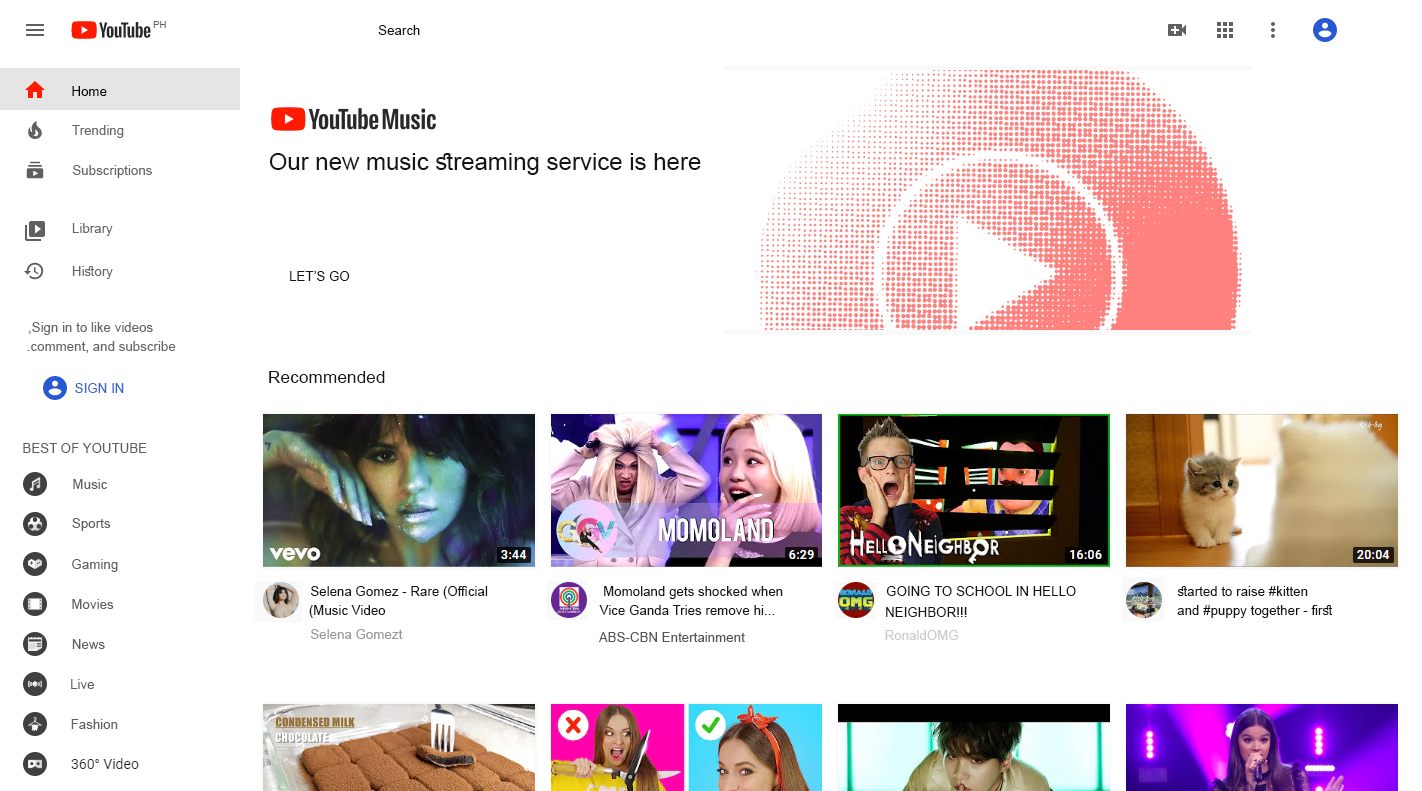
<style>
.page{position:relative;width:1422px;height:791px;background:#ffffff}
.page>*{position:absolute;margin:0}
.t1{font:13.3px "ArialMT";color:#151515}
.t2{font:13.3px "ArialMT";color:#000000}
.t3{font:13.3px "ArialMT";color:#676767}
.t4{font:24px "ArialMT";color:#151515}
.t5{font:17.3px "ArialMT";color:#151515}
.t6{font:13.3px "ArialMT";color:#3a65d7}
.t7{font:13.3px "ArialMT";color:#606060}
.t8{font:13.3px "ArialMT";color:#999999}
.t9{font:13.3px "ArialMT";color:#cbcbcb}
.t10{font:13.3px "ArialMT";color:#565555}
</style>
<div class="page">
<p class="t1" style="left:378px;top:25px;width:42px;height:10px">Search</p>
<p class="t2" style="left:72px;top:86px;width:35px;height:10px">Home</p>
<p class="t3" style="left:72px;top:125px;width:52px;height:13px">Trending</p>
<p class="t4" style="left:269px;top:153px;width:432px;height:22px">Our new music streaming service is here</p>
<p class="t3" style="left:73px;top:165px;width:79px;height:13px">Subscriptions</p>
<p class="t3" style="left:72px;top:223px;width:41px;height:13px">Library</p>
<p class="t3" style="left:72px;top:266px;width:41px;height:13px">History</p>
<p class="t1" style="left:290px;top:271px;width:60px;height:10px">LET’S GO</p>
<p class="t3" style="left:29px;top:322px;width:124px;height:13px">Sign in to like videos,</p>
<p class="t3" style="left:27px;top:341px;width:149px;height:12px">comment, and subscribe.</p>
<p class="t5" style="left:269px;top:371px;width:116px;height:12px">Recommended</p>
<p class="t6" style="left:75px;top:383px;width:49px;height:10px">SIGN IN</p>
<p class="t7" style="left:23px;top:443px;width:124px;height:10px">BEST OF YOUTUBE</p>
<p class="t7" style="left:73px;top:479px;width:35px;height:10px">Music</p>
<p class="t7" style="left:72px;top:518px;width:39px;height:13px">Sports</p>
<p class="t7" style="left:72px;top:559px;width:46px;height:13px">Gaming</p>
<p class="t1" style="left:311px;top:586px;width:177px;height:13px">Selena Gomez - Rare (Official</p>
<p class="t1" style="left:604px;top:586px;width:179px;height:13px">Momoland gets shocked when</p>
<p class="t1" style="left:886px;top:586px;width:190px;height:10px">GOING TO SCHOOL IN HELLO</p>
<p class="t1" style="left:1177px;top:586px;width:131px;height:10px">started to raise #kitten</p>
<p class="t7" style="left:72px;top:599px;width:42px;height:10px">Movies</p>
<p class="t1" style="left:309px;top:605px;width:77px;height:13px">Music Video)</p>
<p class="t1" style="left:599px;top:605px;width:176px;height:10px">...Vice Ganda Tries remove hi</p>
<p class="t1" style="left:1177px;top:605px;width:156px;height:13px">and #puppy together - first</p>
<p class="t1" style="left:886px;top:607px;width:81px;height:10px">!!!NEIGHBOR</p>
<p class="t8" style="left:311px;top:629px;width:92px;height:10px">Selena Gomezt</p>
<p class="t9" style="left:885px;top:630px;width:73px;height:10px">RonaldOMG</p>
<p class="t7" style="left:72px;top:639px;width:33px;height:10px">News</p>
<p class="t10" style="left:599px;top:632px;width:146px;height:10px">ABS-CBN Entertainment</p>
<p class="t7" style="left:71px;top:679px;width:23px;height:10px">Live</p>
<p class="t7" style="left:71px;top:719px;width:47px;height:10px">Fashion</p>
</div>
